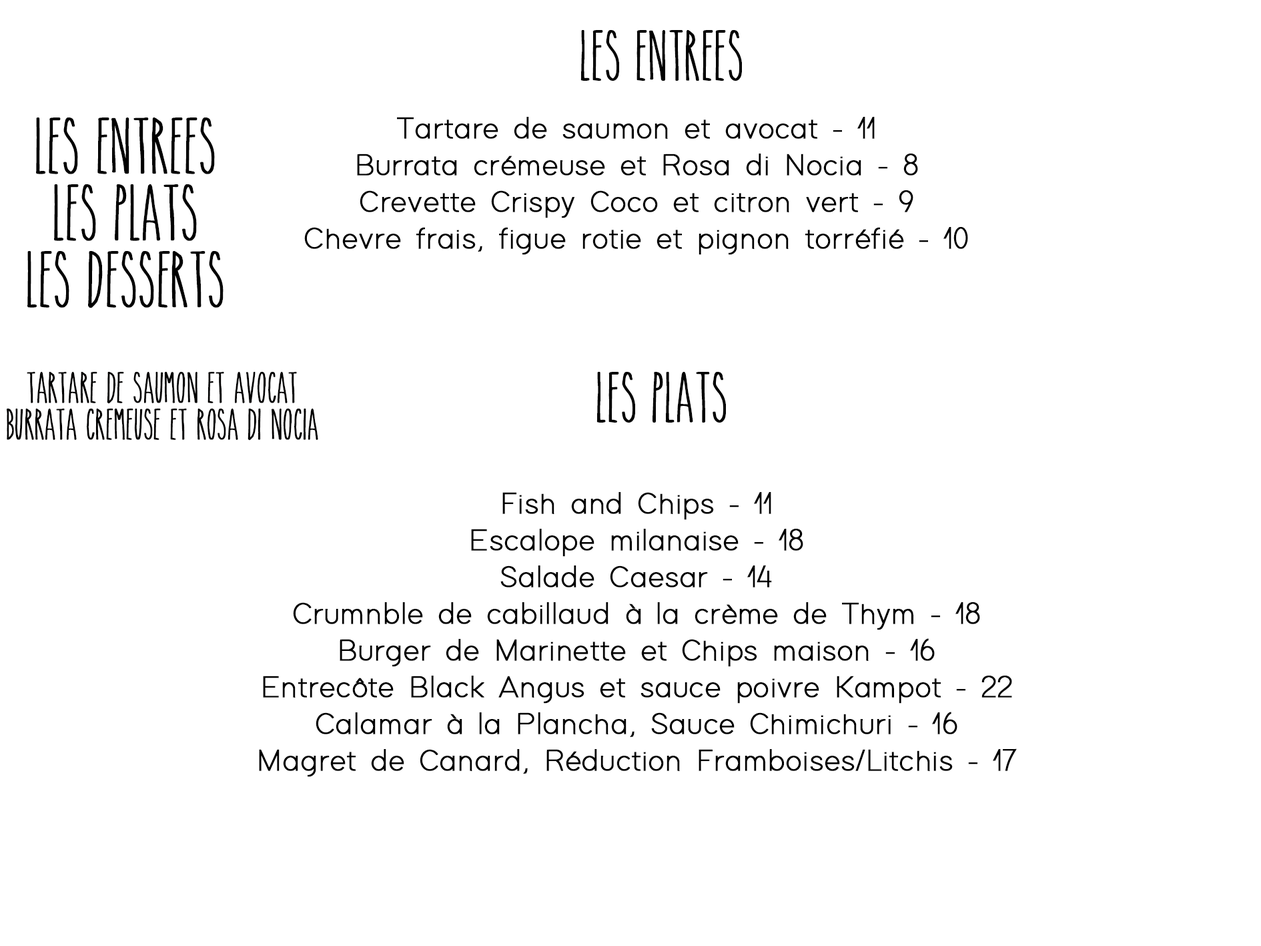
<style>
.page{position:relative;width:1261px;height:946px;background:#ffffff}
.page>*{position:absolute;margin:0}
.t1{font:50px "TheSkinny";color:#000000;font-weight:bold}
.t2{font:55.6px "TheSkinny";color:#000000;font-weight:bold}
.t3{font:30.6px "ModernSansLight";color:#000000;font-weight:bold}
.t4{font:30.6px "TheSkinny";color:#010000;font-weight:bold}
</style>
<div class="page">
<p class="t1" style="left:581px;top:30px;width:161px;height:51px">LES ENTREES</p>
<p class="t2" style="left:27px;top:117px;width:197px;height:191px;text-align:center">Les entrees<br>les plats<br>les desserts</p>
<p class="t3" style="left:304px;top:117px;width:664px;height:138px;text-align:center">Tartare de saumon et avocat - 11<br>Burrata crémeuse et Rosa di Nocia - 8<br>Crevette Crispy Coco et citron vert - 9<br>Chevre frais, figue rotie et pignon torréfié - 10</p>
<p class="t4" style="left:7px;top:372px;width:311px;height:68px;text-align:center">Tartare de saumon et avocat <br>burrata cremeuse et rosa di nocia</p>
<p class="t1" style="left:597px;top:372px;width:129px;height:50px">LES platS</p>
<p class="t3" style="left:259px;top:492px;width:758px;height:285px;text-align:center">Fish and Chips - 11<br>Escalope milanaise - 18<br>Salade Caesar - 14<br>Crumnble de cabillaud à la crème de Thym - 18<br>Burger de Marinette et Chips maison - 16<br>Entrecôte Black Angus et sauce poivre Kampot - 22<br>Calamar à la Plancha, Sauce Chimichuri - 16<br>Magret de Canard, Réduction Framboises/Litchis - 17</p>
</div>
